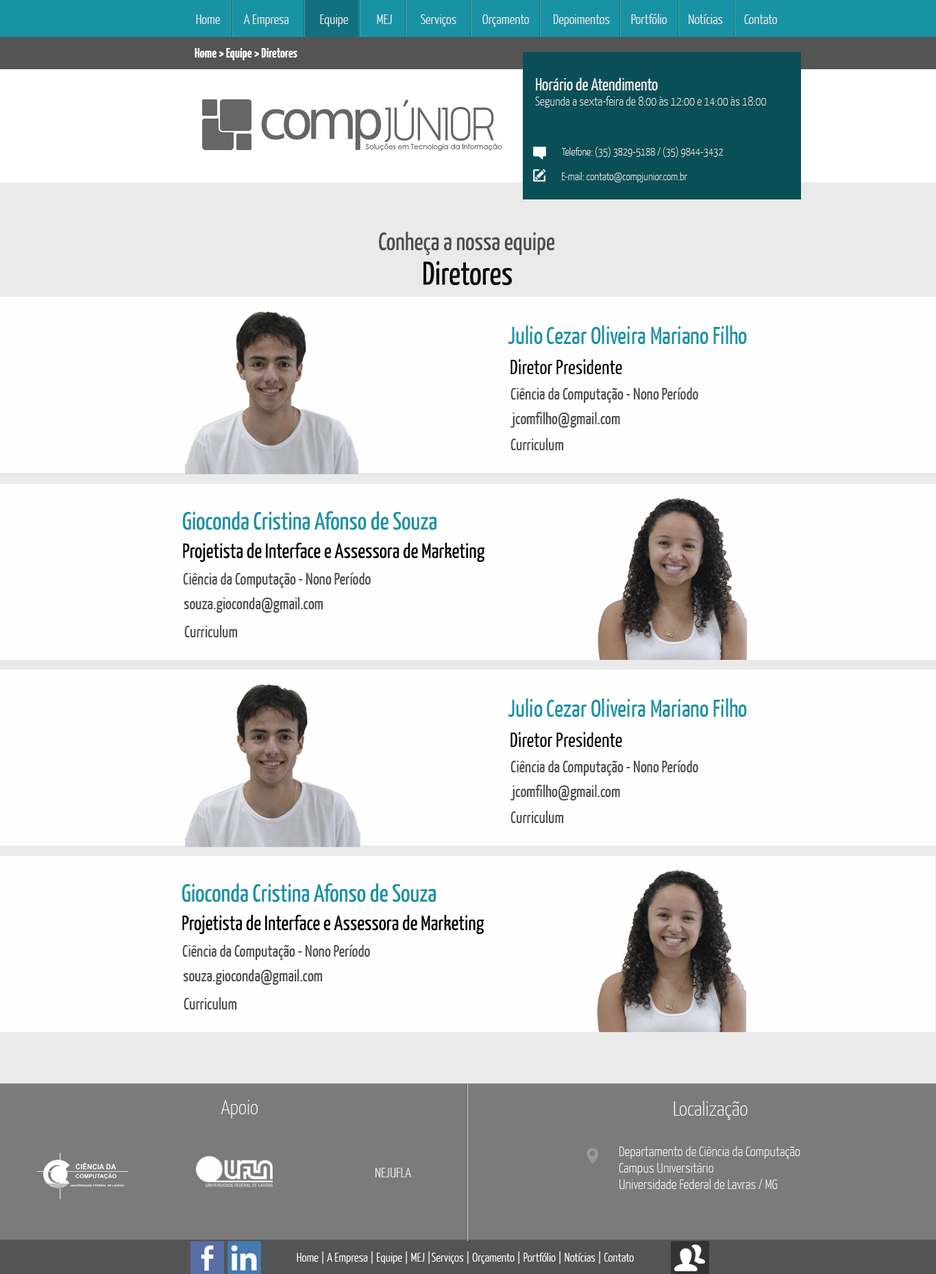
<style>
.page{position:relative;width:936px;height:1274px;background:#fffefe}
.page>*{position:absolute;margin:0}
.t1{font:13.7px "YanoneKaffeesatz-Light";color:#eaeaea}
.t2{font:17.1px "YanoneKaffeesatz-Light";color:#999999}
.t3{font:13.7px "YanoneKaffeesatz-Bold";color:#fffdfd}
.t4{font:12.3px "YanoneKaffeesatz-ExtraLight";color:#eaeaea}
.t5{font:17.1px "YanoneKaffeesatz-Regular";color:#eaeaea}
.t6{font:11px "YanoneKaffeesatz-ExtraLight";color:#eaeaea}
.t7{font:13.7px "YanoneKaffeesatz-ExtraLight";color:#eaeaea}
.t8{font:24.7px "YanoneKaffeesatz-Regular";color:#4d4d4d}
.t9{font:32.9px "YanoneKaffeesatz-Regular";color:#0a0a0a}
.t10{font:24.7px "YanoneKaffeesatz-Regular";color:#1893a6}
.t11{font:20.6px "YanoneKaffeesatz-Regular";color:#030303}
.t12{font:16.4px "YanoneKaffeesatz-Regular";color:#4d4d4d}
.t13{font:20.6px "YanoneKaffeesatz-Regular";color:#020202}
.t14{font:20.6px "YanoneKaffeesatz-ExtraLight";color:#ffffff}
.t15{font:20.6px "YanoneKaffeesatz-ExtraLight";color:#fefefe}
.t16{font:13.7px "YanoneKaffeesatz-ExtraLight";color:#ffffff}
.t17{font:12.3px "YanoneKaffeesatz-Light";color:#ffffff}
</style>
<div class="page">
<p class="t1" style="left:196px;top:14px;width:581px;height:13px"><span class="t2"> </span>Home          A Empresa             Equipe            MEJ            Serviços           Orçamento          Depoimentos         Portfólio         Notícias         Contato</p>
<p class="t3" style="left:195px;top:48px;width:102px;height:12px">Home &gt; Equipe &gt; Diretores</p>
<p class="t4" style="left:535px;top:77px;width:231px;height:31px"><span class="t5">Horário de Atendimento<br></span>Segunda a sexta-feira de 8:00 às 12:00 e 14:00 às 18:00</p>
<p class="t6" style="left:561px;top:147px;width:162px;height:11px"><span class="t7"><br></span>Telefone: (35) 3829-5188 / (35) 9844-3432</p>
<p class="t6" style="left:562px;top:172px;width:125px;height:10px"><span class="t7"><br></span>E-mail: contato@compjunior.com.br</p>
<p class="t8" style="left:379px;top:232px;width:175px;height:24px">Conheça a nossa equipe</p>
<p class="t9" style="left:423px;top:260px;width:90px;height:25px">Diretores</p>
<p class="t10" style="left:508px;top:325px;width:239px;height:19px">Julio Cezar Oliveira Mariano Filho</p>
<p class="t11" style="left:511px;top:359px;width:111px;height:15px">Diretor Presidente</p>
<p class="t12" style="left:511px;top:387px;width:187px;height:16px">Ciência da Computação - Nono Período</p>
<p class="t12" style="left:511px;top:412px;width:109px;height:16px">jcomfilho@gmail.com</p>
<p class="t12" style="left:511px;top:438px;width:53px;height:12px">Curriculum</p>
<p class="t10" style="left:182px;top:511px;width:255px;height:19px">Gioconda Cristina Afonso de Souza</p>
<p class="t13" style="left:183px;top:542px;width:302px;height:20px">Projetista de Interface e Assessora de Marketing</p>
<p class="t12" style="left:183px;top:572px;width:188px;height:16px">Ciência da Computação - Nono Período</p>
<p class="t12" style="left:184px;top:597px;width:139px;height:16px">souza.gioconda@gmail.com</p>
<p class="t12" style="left:184px;top:625px;width:54px;height:12px">Curriculum</p>
<p class="t10" style="left:508px;top:698px;width:239px;height:19px">Julio Cezar Oliveira Mariano Filho</p>
<p class="t11" style="left:511px;top:732px;width:111px;height:15px">Diretor Presidente</p>
<p class="t12" style="left:511px;top:760px;width:187px;height:16px">Ciência da Computação - Nono Período</p>
<p class="t12" style="left:511px;top:785px;width:109px;height:15px">jcomfilho@gmail.com</p>
<p class="t12" style="left:511px;top:811px;width:53px;height:12px">Curriculum</p>
<p class="t10" style="left:182px;top:883px;width:254px;height:19px">Gioconda Cristina Afonso de Souza</p>
<p class="t13" style="left:182px;top:914px;width:302px;height:20px">Projetista de Interface e Assessora de Marketing</p>
<p class="t12" style="left:182px;top:944px;width:188px;height:16px">Ciência da Computação - Nono Período</p>
<p class="t12" style="left:183px;top:969px;width:140px;height:16px">souza.gioconda@gmail.com</p>
<p class="t12" style="left:184px;top:997px;width:53px;height:12px">Curriculum</p>
<p class="t14" style="left:221px;top:1100px;width:37px;height:18px">Apoio</p>
<p class="t15" style="left:674px;top:1101px;width:74px;height:19px">Localização</p>
<p class="t16" style="left:619px;top:1146px;width:181px;height:43px">Departamento de Ciência da Computação<br>Campus Universitário<br>Universidade Federal de Lavras / MG</p>
<p class="t1" style="left:375px;top:1168px;width:36px;height:9px">NEJUFLA</p>
<p class="t17" style="left:297px;top:1251px;width:337px;height:13px"><span class="t2"> </span>Home | A Empresa | Equipe | MEJ |Serviços | Orçamento | Portfólio | Notícias | Contato</p>
</div>
